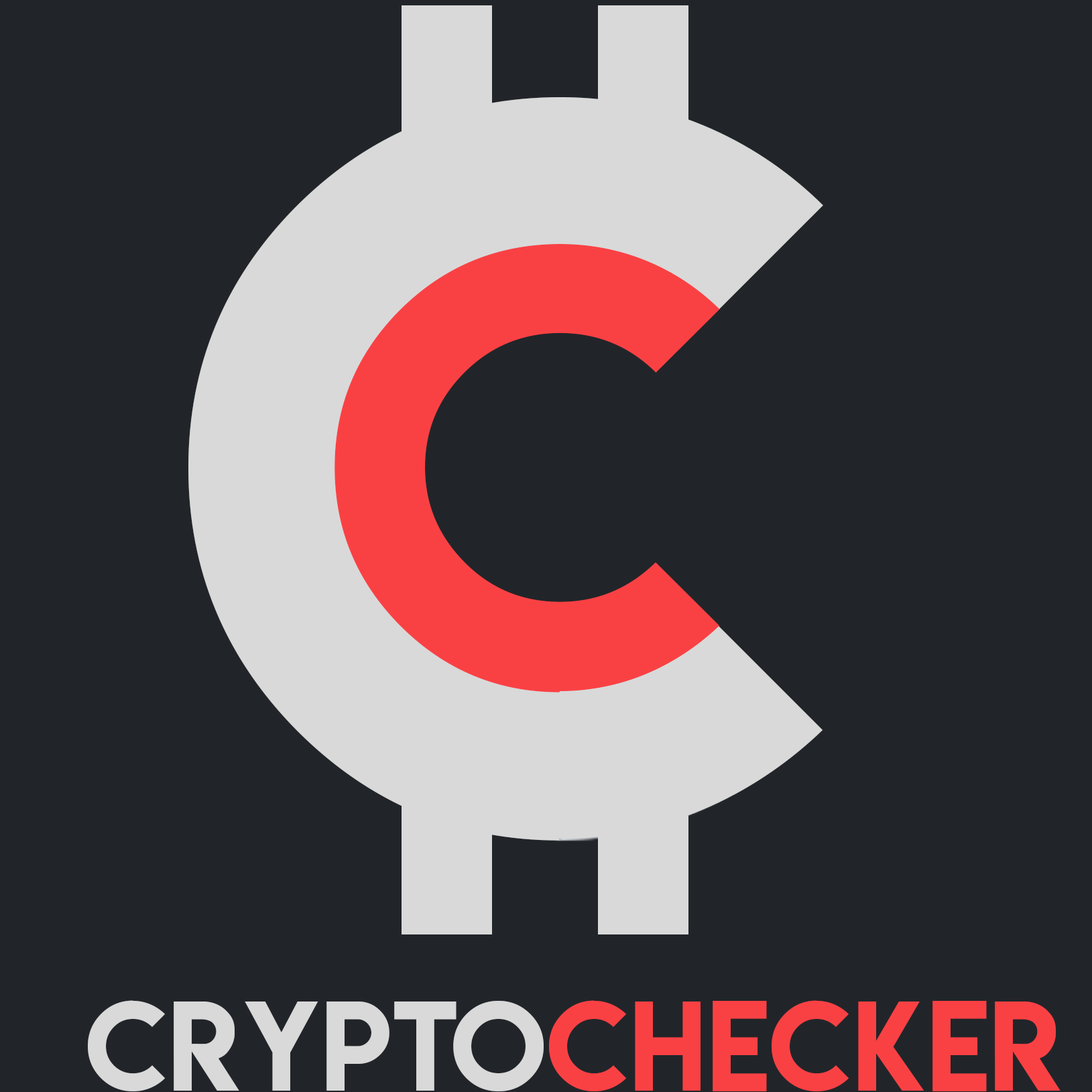
<style>
.page{position:relative;width:1092px;height:1092px;background:#212529}
.page>*{position:absolute;margin:0}
.t1{font:930.3px "LemonMilk";letter-spacing:0.01em;color:#d9d9d9}
.t2{font:560.7px "LemonMilk";letter-spacing:0.01em;color:#f94144}
.t3{font:113.1px "LemonMilk";letter-spacing:0.01em;color:#f94144}
.t4{font:113.1px "LemonMilk";letter-spacing:0.01em;color:#d9d9d9}
</style>
<div class="page">
<p class="t1" style="left:188px;top:97px;width:635px;height:744px">c</p>
<p class="t2" style="left:335px;top:244px;width:385px;height:448px">c</p>
<p class="t3" style="left:88px;top:1000px;width:972px;height:91px"><span class="t4">CRYPTO</span>CHECKER</p>
</div>
